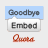
<style>
.page{position:relative;width:48px;height:48px;background:#ececec}
.page>*{position:absolute;margin:0}
.t1{font:7.1px "HelveticaNeue-Medium";letter-spacing:0.025em}
.t2{font:7.1px "HelveticaNeue-Light";letter-spacing:0.12em;color:#2d2d2d}
.t3{font:11px "SantaFeLetPlain";letter-spacing:-0.02em;color:#a82400}
</style>
<div class="page">
<p class="t1" style="left:8px;top:9px;width:32px;height:8px">Goodbye</p>
<p class="t2" style="left:11px;top:22px;width:26px;height:7px">Embed</p>
<p class="t3" style="left:12px;top:34px;width:23px;height:8px">Quora</p>
</div>
